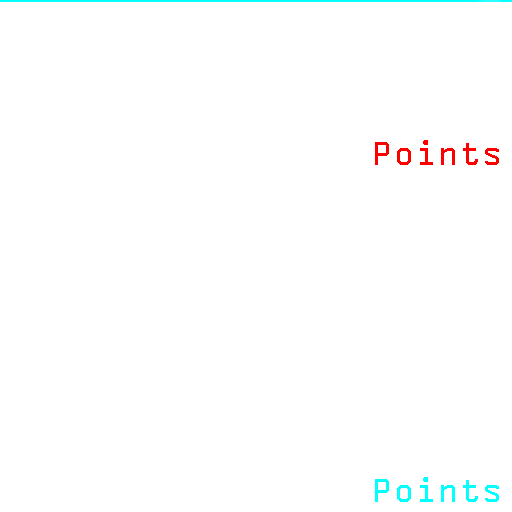
<style>
.page{position:relative;width:512px;height:512px;background:#ffffff}
.page>*{position:absolute;margin:0}
.t1{font:36px "OCRAExtended"}
</style>
<div class="page">
<p class="t1" style="left:375px;top:475px;width:124px;height:25px">Points</p>
</div>
